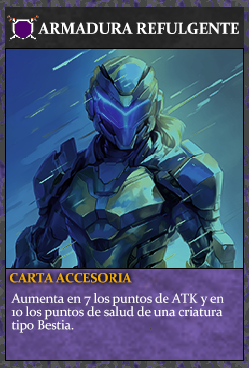
<style>
.page{position:relative;width:249px;height:368px}
.page>*{position:absolute;margin:0}
.t1{font:16px "Constantia-Bold";letter-spacing:-0.02em;color:#ffffff}
.t2{font:13.3px "Constantia-Bold";letter-spacing:-0.02em;color:#f2ac05}
.t3{font:13.3px/13.3px "Constantia";letter-spacing:-0.02em;color:#ffffff}
</style>
<div class="page">
<p class="t1" style="left:38px;top:22px;width:201px;height:12px">ARMADURA REFULGENTE</p>
<p class="t2" style="left:10px;top:273px;width:122px;height:10px">CARTA ACCESORIA</p>
<p class="t3" style="left:11px;top:293px;width:213px;height:40px">Aumenta en 7 los puntos de ATK y en<br>10 los puntos de salud de una criatura<br>tipo Bestia.</p>
</div>
